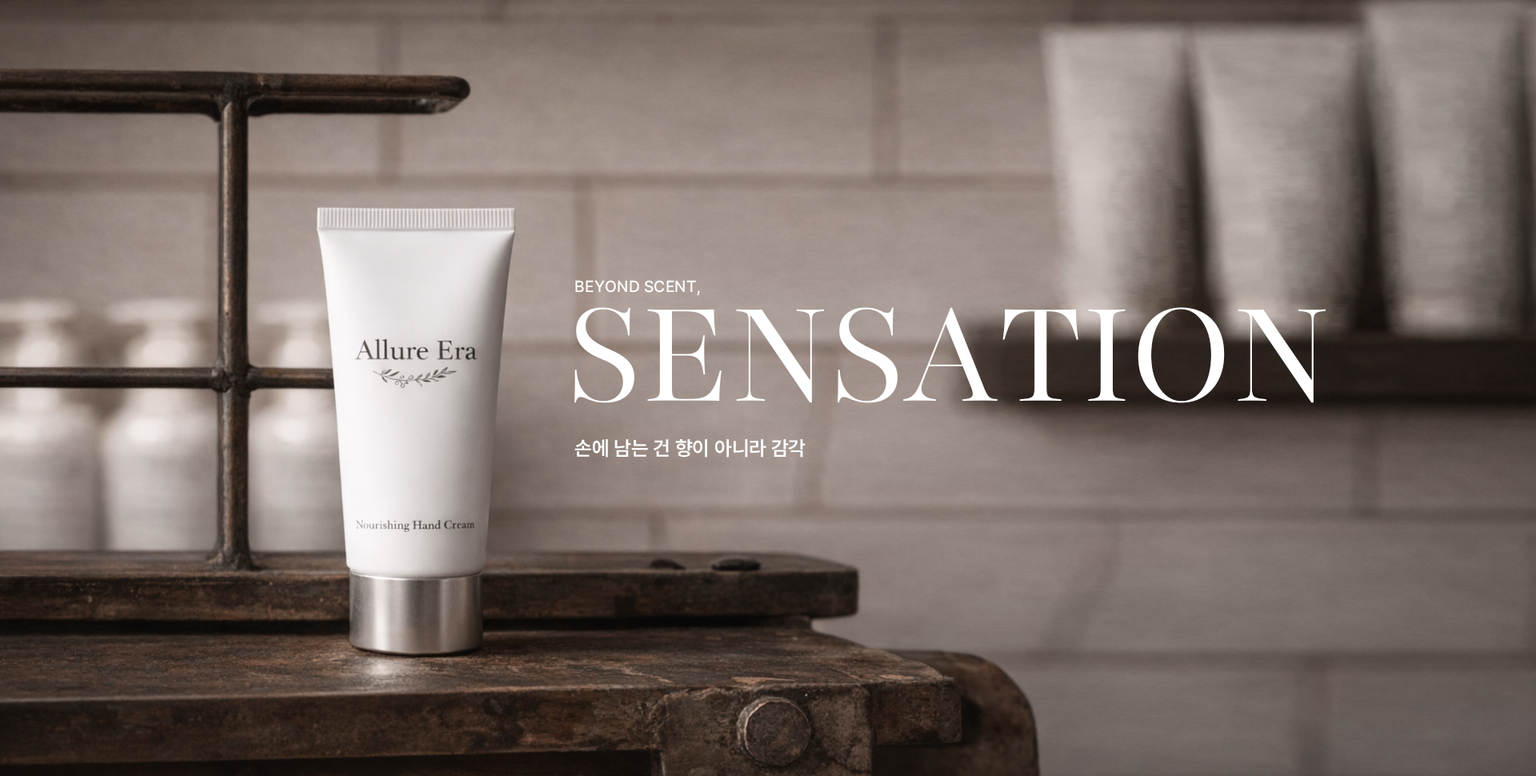
<style>
.page{position:relative;width:1536px;height:776px}
.page>*{position:absolute;margin:0}
.t1{font:16px "Pretendard-Medium";color:#ffffff;text-transform:uppercase}
.t2{font:160px "Playfair144pt-Light";letter-spacing:-0.04em;color:#ffffff;text-transform:uppercase}
.t3{font:20px "Pretendard-SemiBold";color:#ffffff}
</style>
<div class="page">
<p class="t1" style="left:575px;top:280px;width:125px;height:15px">Beyond Scent,</p>
<p class="t2" style="left:575px;top:307px;width:751px;height:96px">Sensation</p>
<p class="t3" style="left:575px;top:439px;width:231px;height:19px">손에 남는 건 향이 아니라 감각</p>
</div>
